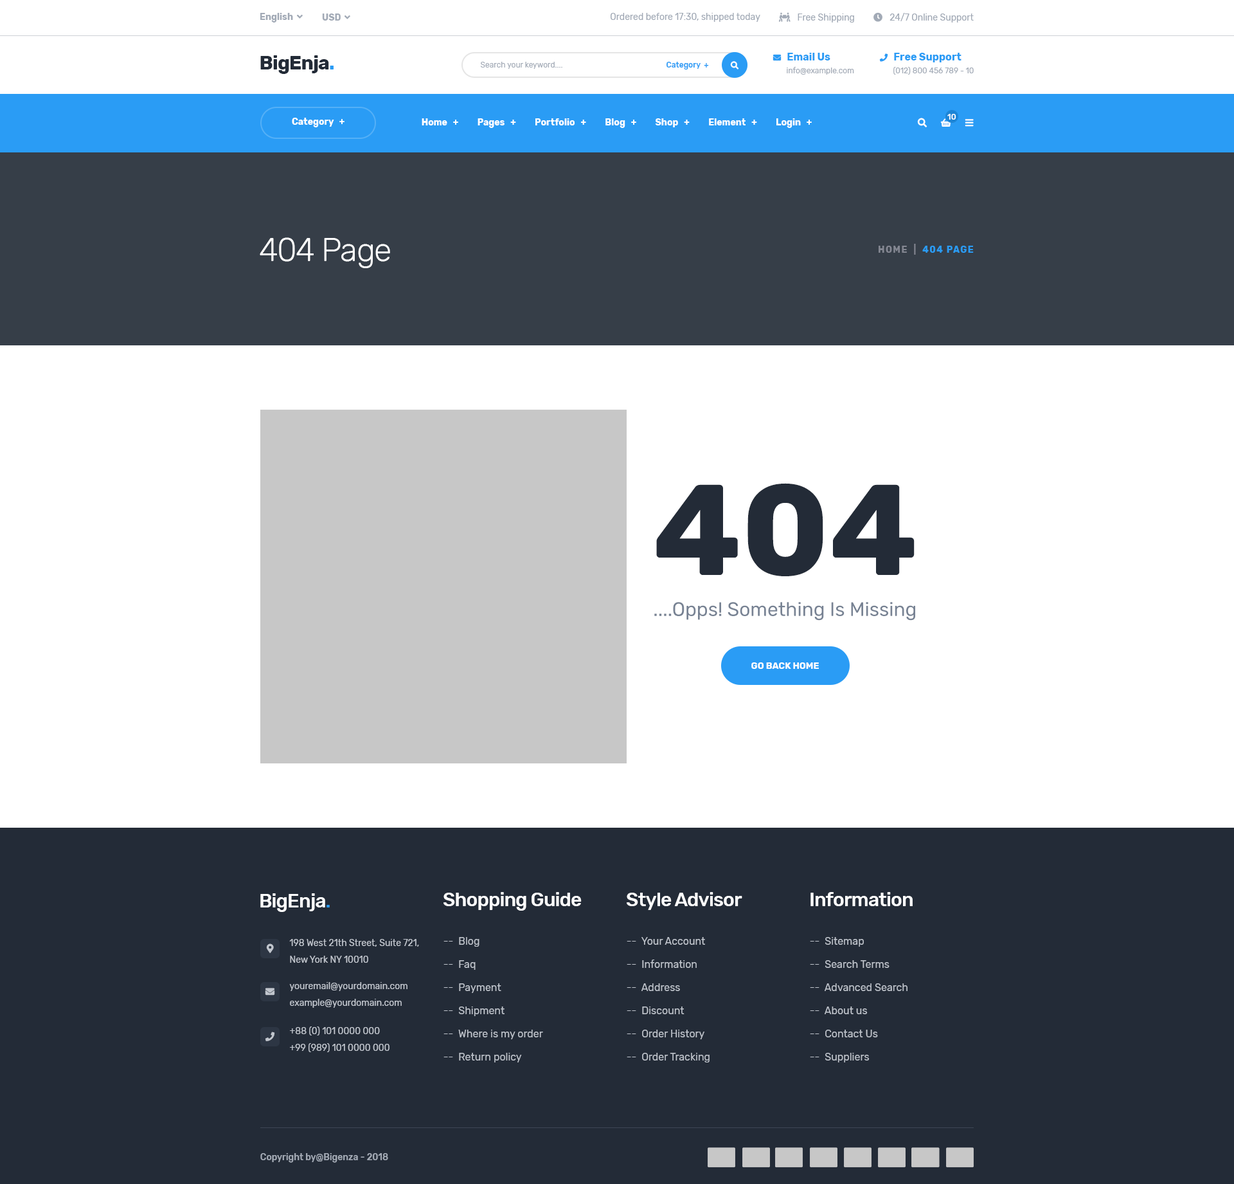
<style>
.page{position:relative;width:1234px;height:1184px;background:#ffffff}
.page>*{position:absolute;margin:0}
.t1{font:9px "Rubik-Regular";color:#a2aab6}
.t2{font:7.7px/12.9px "Rubik-Regular";color:#a2aab6}
.t3{font:7.7px/12.9px "FontAwesome5FreeSolid";color:#2a9cf5}
.t4{font:10.3px/12.9px "Rubik-Bold";color:#2a9cf5}
.t5{font:19.3px "Rubik-Bold";letter-spacing:-0.03em;color:#232b37}
.t6{font:19.3px "Rubik-Bold";letter-spacing:-0.03em;color:#2a9cf5}
.t7{font:7.7px "Rubik-Regular";color:#a2aab6}
.t8{font:7.7px "Rubik-Medium";color:#2a9cf5}
.t9{font:7.7px "Rubik-Medium";color:#ffffff}
.t10{font:9px "Rubik-Bold";color:#ffffff}
.t11{font:32.1px "Rubik-Light";letter-spacing:-0.03em;color:#ffffff}
.t12{font:9px "Rubik-Bold";letter-spacing:0.1em;color:#2a9cf5;text-transform:uppercase}
.t13{font:9px "Rubik-Bold";letter-spacing:0.1em;color:#848792;text-transform:uppercase}
.t14{font:128.6px "Rubik-Bold";color:#232b37;text-transform:uppercase}
.t15{font:19.3px "Rubik-Regular";color:#778293}
.t16{font:9px "Rubik-Bold";color:#ffffff;text-transform:uppercase}
.t17{font:19.3px "Rubik-Medium";letter-spacing:-0.03em;color:#ffffff}
.t18{font:19.3px "Rubik-Medium";letter-spacing:-0.03em;color:#2a9cf5}
.t19{font:9px/16.7px "Rubik-Regular";color:#c1c6ce}
.t20{font:10.3px/23.1px "Rubik-Regular";color:#c1c6ce}
.t21{font:9px "Rubik-Medium";color:#a4abb6}
</style>
<div class="page">
<p class="t1" style="left:611px;top:13px;width:149px;height:9px">Ordered before 17:30, shipped today</p>
<p class="t2" style="left:879px;top:53px;width:95px;height:22px"><span class="t3">phone  </span><span class="t4">Free Support<br>      </span> (012) 800 456 789 - 10</p>
<p class="t5" style="left:260px;top:55px;width:74px;height:19px">BigEnja<span class="t6">.</span></p>
<p class="t7" style="left:480px;top:62px;width:82px;height:7px">Search your keyword....</p>
<p class="t8" style="left:667px;top:62px;width:42px;height:8px">Category  +</p>
<p class="t9" style="left:948px;top:114px;width:9px;height:6px">10</p>
<p class="t10" style="left:292px;top:118px;width:53px;height:9px">Category   +</p>
<p class="t10" style="left:422px;top:118px;width:390px;height:10px">Home   +          Pages   +          Portfolio   +          Blog   +          Shop   +          Element   +          Login   +</p>
<p class="t11" style="left:260px;top:237px;width:130px;height:31px">404 Page</p>
<p class="t12" style="left:879px;top:244px;width:95px;height:11px"><span class="t13">home  |  </span>404 Page</p>
<p class="t14" style="left:656px;top:483px;width:259px;height:93px">404</p>
<p class="t15" style="left:654px;top:602px;width:261px;height:18px">....Opps! Something Is Missing</p>
<p class="t16" style="left:752px;top:662px;width:67px;height:7px">go back home</p>
<p class="t17" style="left:260px;top:893px;width:70px;height:19px">BigEnja<span class="t18">.</span></p>
<p class="t17" style="left:444px;top:892px;width:138px;height:18px">Shopping Guide</p>
<p class="t17" style="left:627px;top:892px;width:115px;height:18px">Style Advisor</p>
<p class="t17" style="left:811px;top:892px;width:102px;height:14px">Information</p>
<p class="t19" style="left:289px;top:939px;width:130px;height:23px">198 West 21th Street, Suite 721,<br>New York NY 10010</p>
<p class="t20" style="left:444px;top:937px;width:99px;height:125px">--  Blog<br>--  Faq<br>--  Payment<br>--  Shipment<br>--  Where is my order<br>--  Return policy</p>
<p class="t20" style="left:627px;top:937px;width:83px;height:125px">--  Your Account<br>--  Information<br>--  Address<br>--  Discount<br>--  Order History<br>--  Order Tracking</p>
<p class="t20" style="left:810px;top:937px;width:98px;height:125px">--  Sitemap<br>--  Search Terms<br>--  Advanced Search<br>--  About us<br>--  Contact Us<br>--  Suppliers</p>
<p class="t19" style="left:289px;top:982px;width:119px;height:25px">youremail@yourdomain.com<br>example@yourdomain.com</p>
<p class="t19" style="left:290px;top:1026px;width:100px;height:26px">+88 (0) 101 0000 000<br>+99 (989) 101 0000 000</p>
<p class="t21" style="left:260px;top:1153px;width:128px;height:9px">Copyright by@Bigenza - 2018</p>
</div>
